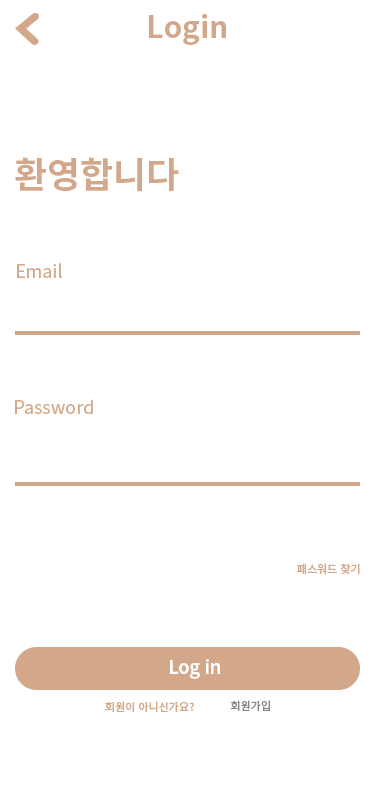
<style>
.page{position:relative;width:375px;height:812px;background:#ffffff}
.page>*{position:absolute;margin:0}
.t1{font:30px "NotoSansKR-Bold";color:#d3a88a}
.t2{font:36px "NotoSansKR-Bold";color:#d3a88a}
.t3{font:18px "NotoSansKR-Regular";color:#d3a88a}
.t4{font:11px "NotoSansKR-Medium";color:#d3a88a}
.t5{font:18px "NotoSansKR-Bold";color:#ffffff}
.t6{font:11px "NotoSansKR-Medium";color:#8b8987}
</style>
<div class="page">
<p class="t1" style="left:149px;top:14px;width:77px;height:31px">Login</p>
<p class="t2" style="left:15px;top:157px;width:164px;height:35px">환영합니다</p>
<p class="t3" style="left:17px;top:263px;width:45px;height:15px">Email</p>
<p class="t3" style="left:15px;top:399px;width:78px;height:15px">Password</p>
<p class="t4" style="left:297px;top:563px;width:63px;height:12px">패스워드 찾기</p>
<p class="t5" style="left:170px;top:659px;width:50px;height:20px">Log in</p>
<p class="t4" style="left:105px;top:701px;width:89px;height:12px">회원이 아니신가요?</p>
<p class="t6" style="left:231px;top:700px;width:39px;height:11px">회원가입</p>
</div>
